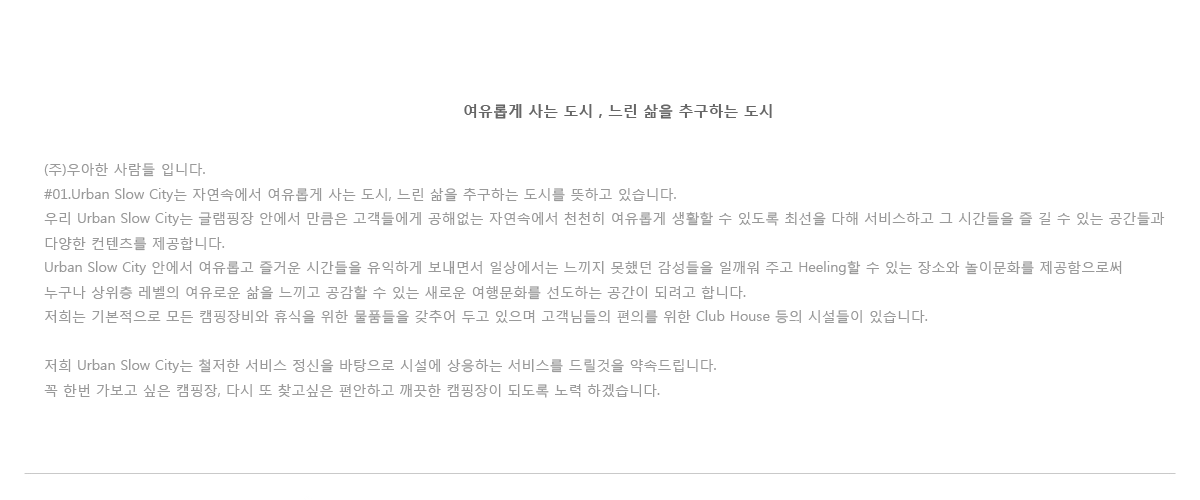
<style>
.page{position:relative;width:1200px;height:500px;background:#ffffff}
.page>*{position:absolute;margin:0}
.t1{font:15px "MalgunGothicBold";color:#666666}
.t2{font:14px "MalgunGothicRegular";color:#999999}
</style>
<div class="page">
<p class="t1" style="left:464px;top:104px;width:308px;height:15px">여유롭게 사는 도시 , 느린 삶을 추구하는 도시</p>
<p class="t2" style="left:44px;top:163px;width:1121px;height:235px">(주)우아한 사람들 입니다. <br>#01.Urban Slow City는 자연속에서 여유롭게 사는 도시, 느린 삶을 추구하는 도시를 뜻하고 있습니다.<br>우리 Urban Slow City는 글램핑장 안에서 만큼은 고객들에게 공해없는 자연속에서 천천히 여유롭게 생활할 수 있도록 최선을 다해 서비스하고 그 시간들을 즐 길 수 있는 공간들과 <br>다양한 컨텐츠를 제공합니다.<br>Urban Slow City 안에서 여유롭고 즐거운 시간들을 유익하게 보내면서 일상에서는 느끼지 못했던 감성들을 일깨워 주고 Heeling할 수 있는 장소와 놀이문화를 제공함으로써 <br>누구나 상위층 레벨의 여유로운 삶을 느끼고 공감할 수 있는 새로운 여행문화를 선도하는 공간이 되려고 합니다.<br>저희는 기본적으로 모든 캠핑장비와 휴식을 위한 물품들을 갖추어 두고 있으며 고객님들의 편의를 위한 Club House 등의 시설들이 있습니다. <br><br>저희 Urban Slow City는 철저한 서비스 정신을 바탕으로 시설에 상응하는 서비스를 드릴것을 약속드립니다. <br>꼭 한번 가보고 싶은 캠핑장, 다시 또 찾고싶은 편안하고 깨끗한 캠핑장이 되도록 노력 하겠습니다.</p>
</div>
